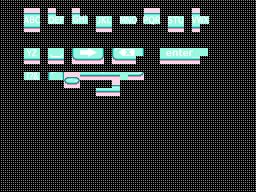
<style>
.page{position:relative;width:256px;height:192px;background:#000000}
.page>*{position:absolute;margin:0}
.t1{font:8px "HummingStd-E";letter-spacing:0.02em;color:#ffffff;scale:0.83 1}
.t2{font:8px "HummingStd-E";letter-spacing:0.05em;color:#ffffff;scale:0.83 1}
.t3{font:8px "HummingStd-E";letter-spacing:0.02em;color:#ffffff;scale:0.75 1}
.t4{font:11px "HummingStd-E";letter-spacing:0.05em;color:#ffffff}
.t5{font:9px "HummingStd-E";letter-spacing:0.05em;color:#ffffff}
</style>
<div class="page">
<p class="t1" style="left:23px;top:16px;width:18px;height:8px">ABC</p>
<p class="t1" style="left:49px;top:16px;width:16px;height:8px">DEF</p>
<p class="t1" style="left:73px;top:15px;width:14px;height:8px">GHI</p>
<p class="t2" style="left:97px;top:16px;width:15px;height:8px">JKL</p>
<p class="t3" style="left:120px;top:16px;width:17px;height:8px">MNO</p>
<p class="t1" style="left:143px;top:16px;width:18px;height:9px">PQR</p>
<p class="t1" style="left:168px;top:16px;width:16px;height:8px">STU</p>
<p class="t3" style="left:191px;top:16px;width:18px;height:8px">VWX</p>
<p class="t1" style="left:26px;top:49px;width:11px;height:8px">YZ</p>
<p class="t4" style="left:50px;top:54px;width:13px;height:4px;rotate:-90deg">[</p>
<p class="t5" style="left:166px;top:49px;width:27px;height:8px">enter</p>
<p class="t1" style="left:27px;top:72px;width:12px;height:8px">!?&amp;</p>
</div>
